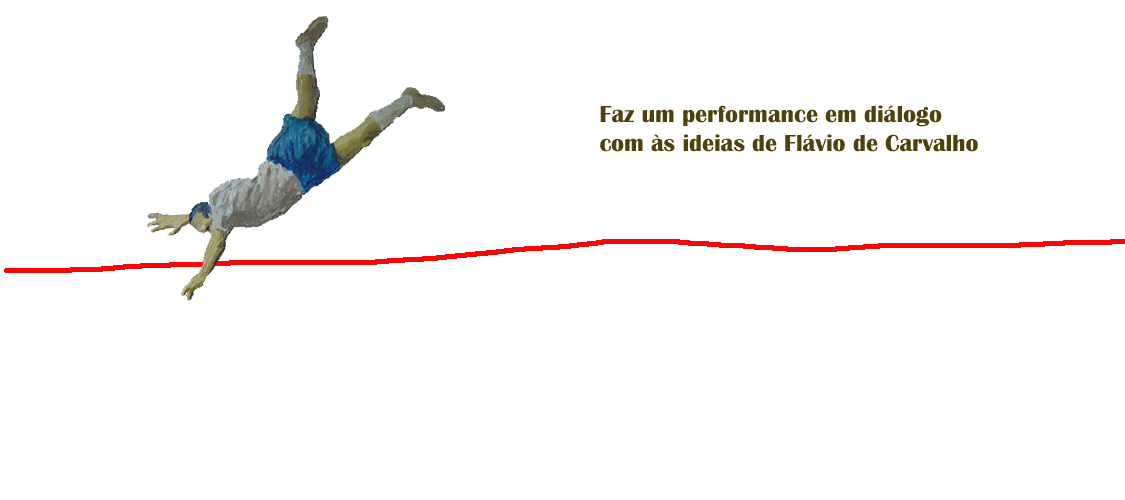
<style>
.page{position:relative;width:1125px;height:500px;background:#ffffff}
.page>*{position:absolute;margin:0}
.t1{font:24px "BritannicBold";color:#4e410b}
</style>
<div class="page">
<p class="t1" style="left:600px;top:105px;width:378px;height:47px">Faz um performance em diálogo<br>com às ideias de Flávio de Carvalho</p>
</div>
